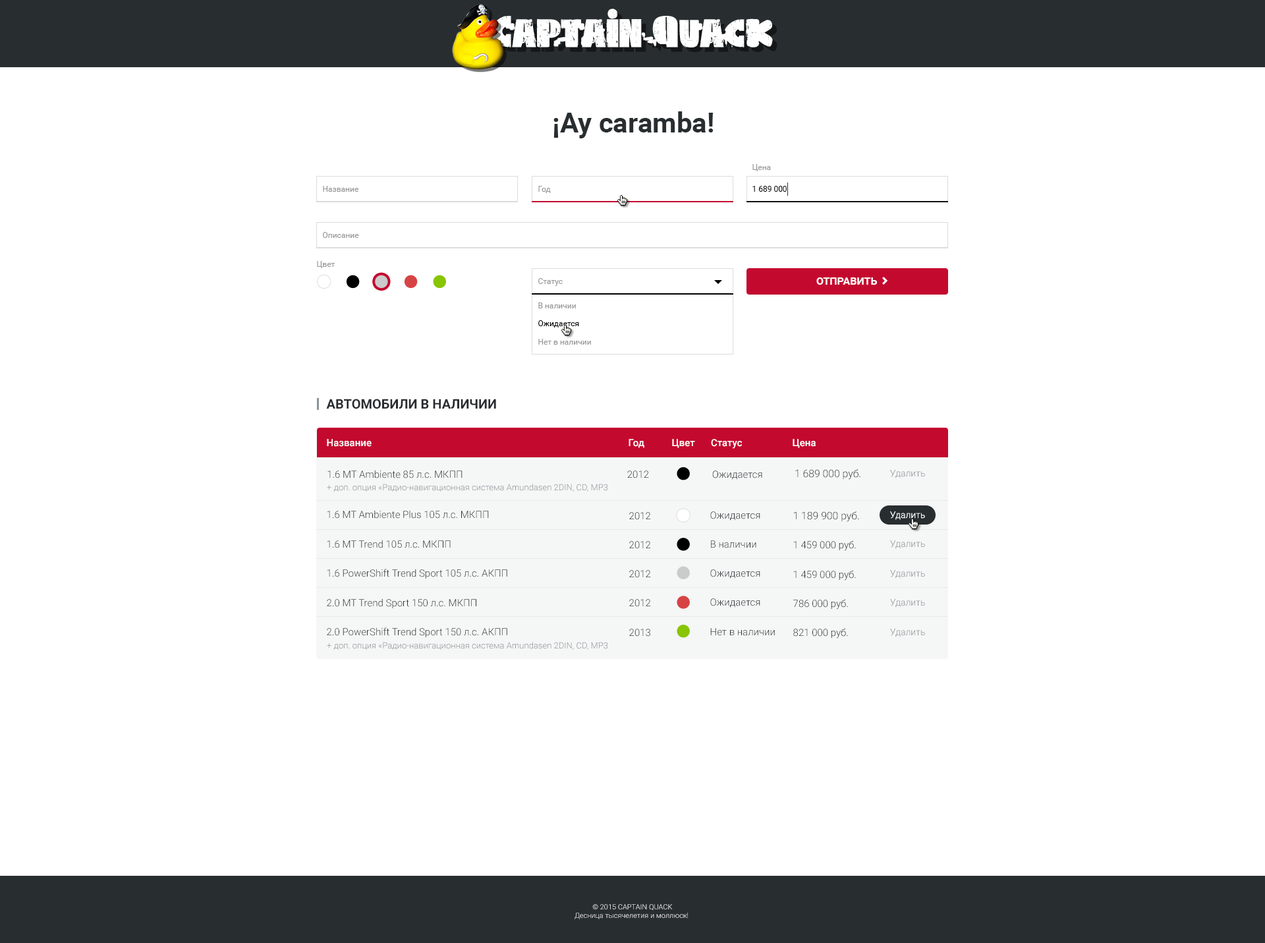
<style>
.page{position:relative;width:1265px;height:943px;background:#ffffff}
.page>*{position:absolute;margin:0}
.t1{font:27.7px "Roboto-Bold";color:#282d30}
.t2{font:7.9px "Roboto-Regular";color:#999999}
.t3{font:7.9px "Roboto-Regular";color:#111111}
.t4{font:10.5px "Roboto-Bold";color:#ffffff;text-transform:uppercase}
.t5{font:7.9px/11.9px "Roboto-Regular";color:#999999}
.t6{font:7.9px/11.9px "Roboto-Regular";color:#000000}
.t7{font:13.2px "Roboto-Bold";color:#282d30;text-transform:uppercase}
.t8{font:9.9px "Roboto-Medium";color:#ffffff}
.t9{font:9.9px "Roboto-Light";color:#323232}
.t10{font:9.9px "Roboto-Light";color:#282d30}
.t11{font:10.4px "Roboto-Light"}
.t12{font:9.2px "Roboto-Light";color:#8b9497}
.t13{font:8.6px "Roboto-Light";color:#8b9497}
.t14{font:9.9px "Roboto-Light"}
.t15{font:10.4px "Roboto-Light";color:#282d30}
.t16{font:9.2px "Roboto-Light";color:#ffffff}
.t17{font:7.2px "Roboto-Light"}
</style>
<div class="page">
<p class="t1" style="left:553px;top:111px;width:160px;height:27px">¡Ay caramba!</p>
<p class="t2" style="left:752px;top:164px;width:19px;height:7px">Цена</p>
<p class="t2" style="left:323px;top:186px;width:36px;height:6px">Название</p>
<p class="t2" style="left:538px;top:186px;width:13px;height:7px">Год</p>
<p class="t3" style="left:752px;top:186px;width:35px;height:6px">1 689 000</p>
<p class="t2" style="left:323px;top:232px;width:36px;height:6px">Описание</p>
<p class="t2" style="left:317px;top:261px;width:18px;height:7px">Цвет</p>
<p class="t2" style="left:538px;top:278px;width:25px;height:8px">Статус</p>
<p class="t4" style="left:816px;top:277px;width:61px;height:8px">Отправить</p>
<p class="t5" style="left:538px;top:302px;width:53px;height:43px">В наличии<br><span class="t6">Ожидается<br></span>Нет в наличии</p>
<p class="t7" style="left:326px;top:399px;width:170px;height:10px">Автомобили в наличии</p>
<p class="t8" style="left:327px;top:439px;width:45px;height:8px">Название</p>
<p class="t8" style="left:628px;top:439px;width:16px;height:9px">Год</p>
<p class="t8" style="left:672px;top:439px;width:23px;height:9px">Цвет</p>
<p class="t8" style="left:711px;top:439px;width:31px;height:10px">Статус</p>
<p class="t8" style="left:793px;top:439px;width:23px;height:9px">Цена</p>
<p class="t9" style="left:327px;top:470px;width:135px;height:8px">1.6 MT Ambiente 85 л.с. МКПП</p>
<p class="t10" style="left:627px;top:470px;width:22px;height:8px">2012</p>
<p class="t10" style="left:712px;top:470px;width:50px;height:10px">Ожидается</p>
<p class="t11" style="left:795px;top:469px;width:65px;height:11px">1 689 000 руб.</p>
<p class="t12" style="left:890px;top:470px;width:35px;height:8px">Удалить</p>
<p class="t13" style="left:327px;top:484px;width:281px;height:7px">+ доп. опция «Радио-навигационная система Amundasen 2DIN, CD, MP3</p>
<p class="t9" style="left:327px;top:510px;width:180px;height:127px">1.6 MT Ambiente Plus 105 л.с. МКПП<br>1.6 MT Trend 105 л.с. МКПП<br>1.6 PowerShift Trend Sport 105 л.с. АКПП<br>2.0 MT Trend Sport 150 л.с. МКПП<br>2.0 PowerShift Trend Sport 150 л.с. АКПП</p>
<p class="t14" style="left:629px;top:512px;width:22px;height:124px">2012<br>2012<br>2012<br>2012<br>2013</p>
<p class="t10" style="left:710px;top:511px;width:65px;height:125px">Ожидается<br>В наличии<br>Ожидается<br>Ожидается<br>Нет в наличии</p>
<p class="t10" style="left:793px;top:511px;width:66px;height:127px"><span class="t15">1 189 900 руб.<br></span>1 459 000 руб.<br>1 459 000 руб.<br>786 000 руб.<br>821 000 руб.</p>
<p class="t16" style="left:890px;top:511px;width:35px;height:9px">Удалить</p>
<p class="t12" style="left:890px;top:540px;width:35px;height:9px">Удалить</p>
<p class="t12" style="left:890px;top:570px;width:35px;height:8px">Удалить</p>
<p class="t12" style="left:890px;top:599px;width:35px;height:8px">Удалить</p>
<p class="t12" style="left:890px;top:628px;width:35px;height:9px">Удалить</p>
<p class="t13" style="left:327px;top:642px;width:281px;height:8px">+ доп. опция «Радио-навигационная система Amundasen 2DIN, CD, MP3</p>
<p class="t17" style="left:574px;top:904px;width:114px;height:15px;text-align:center">© 2015 CAPTAIN QUACK<br>Десница тысячелетия и моллюск!</p>
</div>
